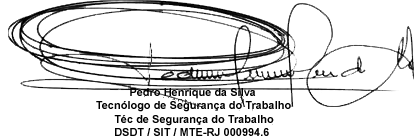
<style>
.page{position:relative;width:419px;height:137px;background:#ffffff}
.page>*{position:absolute;margin:0}
.t1{font:11px "Arial-BoldMT";color:#000000}
</style>
<div class="page">
<p class="t1" style="left:96px;top:88px;width:195px;height:48px">Pedro Henrique da Silva<br>Tecnólogo de Segurança do Trabalho<br>      Téc de Segurança do Trabalho<br>      DSDT / SIT / MTE-RJ 000994.6</p>
</div>
